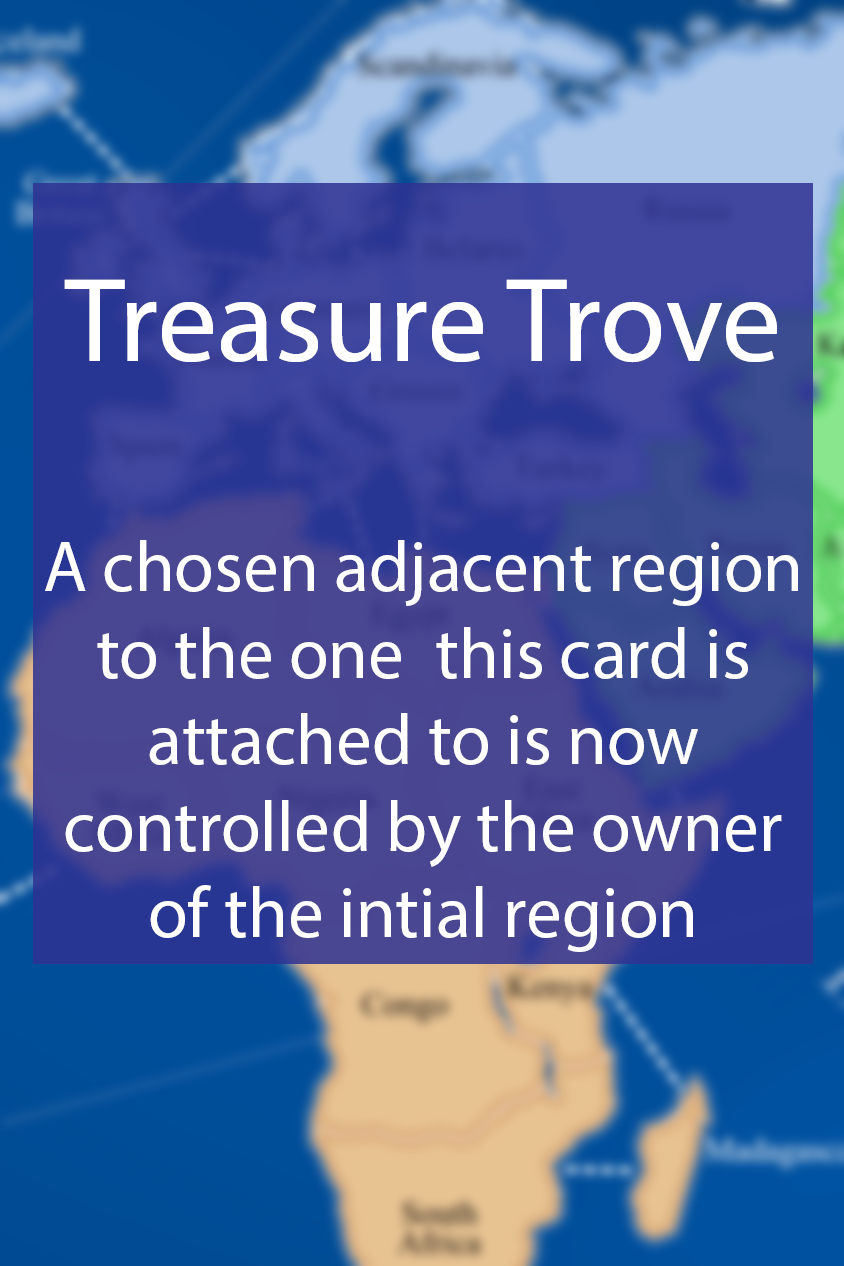
<style>
.page{position:relative;width:844px;height:1266px}
.page>*{position:absolute;margin:0}
.t1{font:72px "MyriadPro-Regular";color:#ffffff}
.t2{font:48px "MyriadPro-Regular";color:#ffffff}
.t3{font:120px "MyriadPro-Regular";color:#ffffff}
</style>
<div class="page">
<p class="t1" style="left:45px;top:279px;width:753px;height:673px;text-align:center"><span class="t2"><br></span><span class="t3">Treasure Trove<br><br><br></span><br>A chosen adjacent region to the one  this card is attached to is now controlled by the owner of the intial region</p>
</div>
